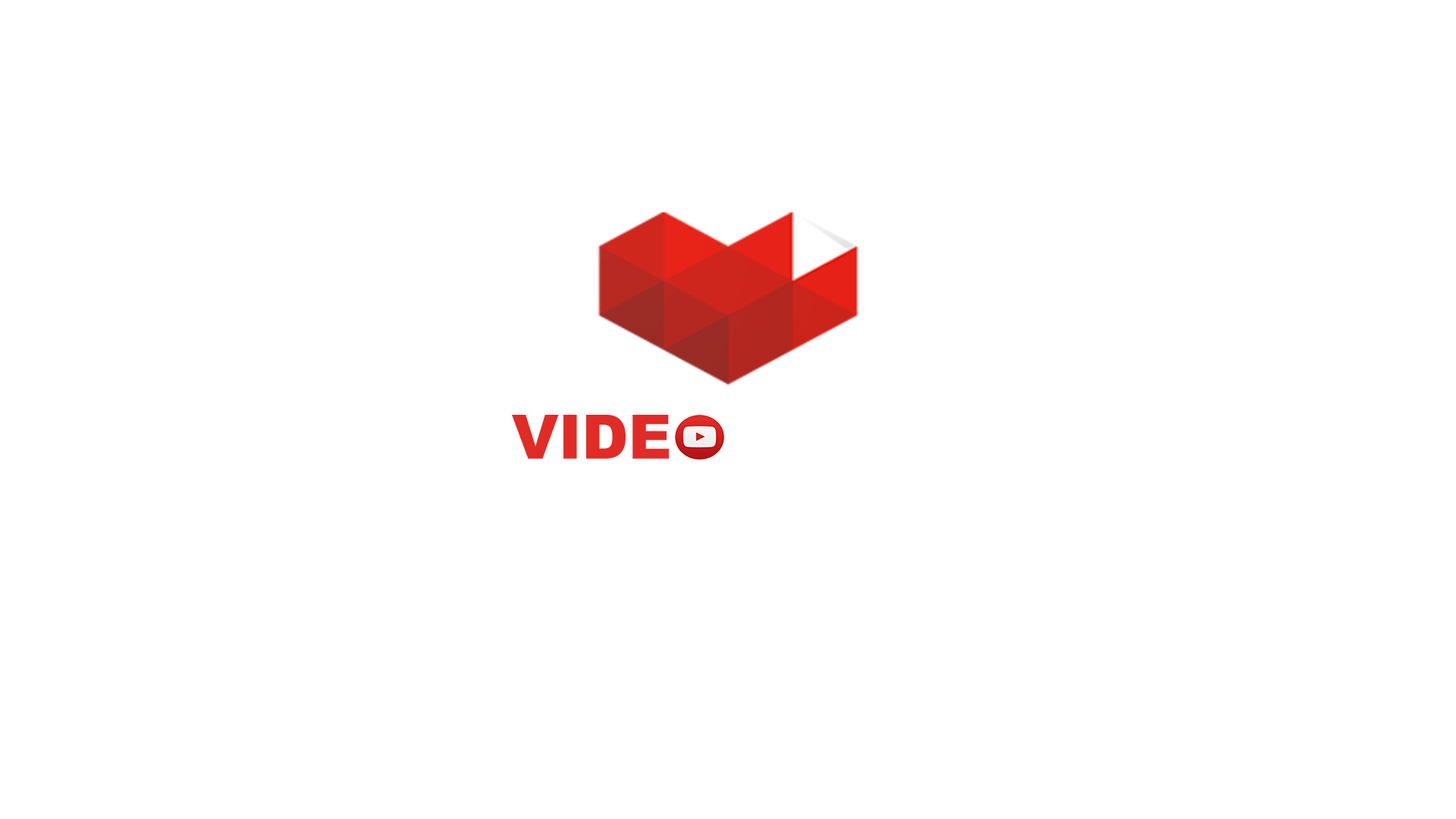
<style>
.page{position:relative;width:1456px;height:819px;background:#ffffff}
.page>*{position:absolute;margin:0}
.t1{font:61.2px "Arial-Black";color:#e12b26}
.t2{font:61.2px "Arial-Black";color:#ffffff}
</style>
<div class="page">
<p class="t1" style="left:512px;top:414px;width:433px;height:46px">VIDE    <span class="t2">GAME</span></p>
</div>
